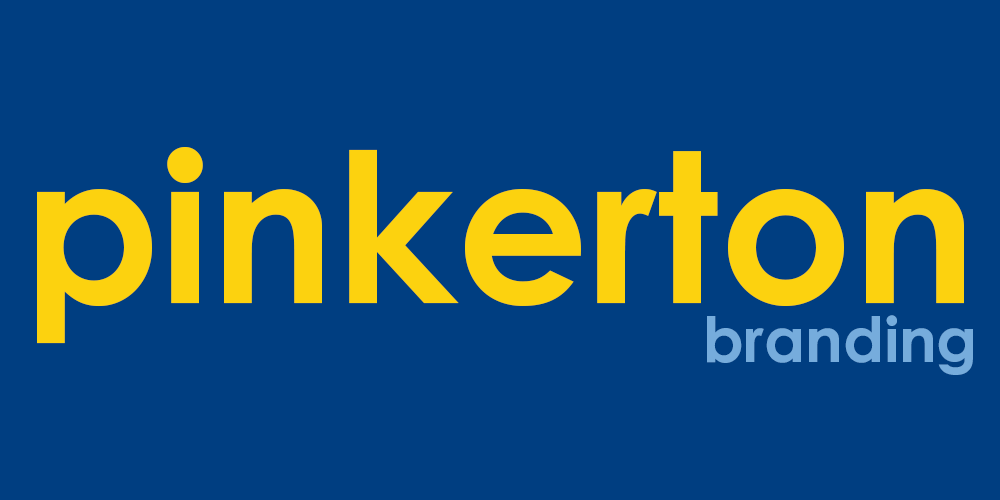
<style>
.page{position:relative;width:1000px;height:500px;background:#003e81}
.page>*{position:absolute;margin:0}
.t1{font:208.3px "CenturyGothicPro-Bold";color:#fcd20f}
.t2{font:62.5px "CenturyGothicPro-Bold";color:#76acdc}
</style>
<div class="page">
<p class="t1" style="left:37px;top:147px;width:927px;height:197px">pinkerton</p>
<p class="t2" style="left:707px;top:315px;width:266px;height:60px">branding</p>
</div>
